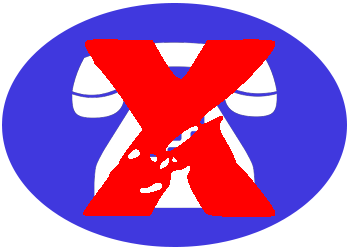
<style>
.page{position:relative;width:350px;height:250px;background:#4038de}
.page>*{position:absolute;margin:0}
.t1{font:289px "Tomb_Raider";letter-spacing:0.14em;color:#ff0000;scale:1.07 1}
</style>
<div class="page">
<p class="t1" style="left:83px;top:39px;width:192px;height:178px">X</p>
</div>
